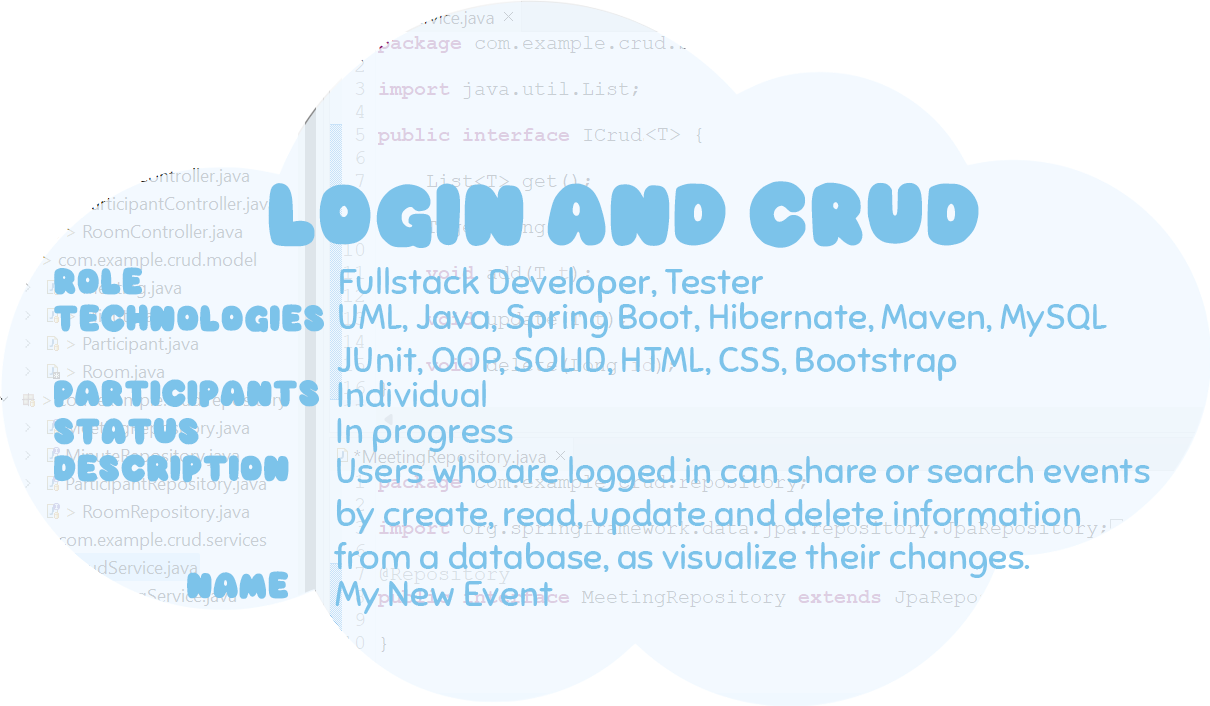
<style>
.page{position:relative;width:1210px;height:706px;background:#f3f9ff}
.page>*{position:absolute;margin:0}
.t1{font:75px "KawaiiBubble-Regular";color:#7cc3ea}
.t2{font:31.1px "KawaiiBubble-Regular";color:#7cc3ea}
.t3{font:36px "Sniglet-Regular";color:#7cc3ea}
.t4{font:8.6px "Sniglet-Regular";color:#7cc3ea}
</style>
<div class="page">
<p class="t1" style="left:268px;top:181px;width:711px;height:67px">login and CRUd</p>
<p class="t2" style="left:54px;top:267px;width:270px;height:332px">role<br>technologies<br><br>participants<br>status<br>description<br><br><br><br><br><br><br><br><br>                 name</p>
<p class="t3" style="left:340px;top:267px;width:424px;height:36px">Fullstack Developer, Tester</p>
<p class="t3" style="left:337px;top:302px;width:770px;height:79px">UML, Java, Spring Boot, Hibernate, Maven, MySQL<br>             JUnit, OOP, SOLID, HTML, CSS, Bootstrap</p>
<p class="t3" style="left:338px;top:380px;width:148px;height:27px">Individual</p>
<p class="t3" style="left:337px;top:418px;width:176px;height:34px">In progress</p>
<p class="t4" style="left:334px;top:456px;width:816px;height:122px"><span class="t3">                           </span>Users who are logged in can share or search events<br>                           by create, read, update and delete information <br>                           from a database, as visualize their changes.</p>
<p class="t3" style="left:335px;top:581px;width:218px;height:33px">My New Event</p>
</div>
